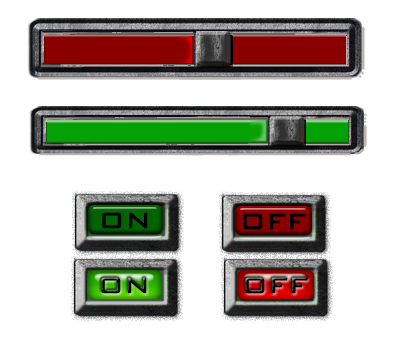
<style>
.page{position:relative;width:396px;height:362px;background:#ffffff}
.page>*{position:absolute;margin:0}
.t1{font:30px "BankGothicBT-Medium";color:#000000}
.t2{font:30px "BankGothicBT-Medium"}
</style>
<div class="page">
<p class="t1" style="left:102px;top:212px;width:46px;height:17px">ON</p>
<p class="t1" style="left:243px;top:213px;width:63px;height:17px">OFF</p>
<p class="t1" style="left:101px;top:277px;width:46px;height:17px">ON</p>
<p class="t2" style="left:245px;top:277px;width:63px;height:17px">OFF</p>
</div>
